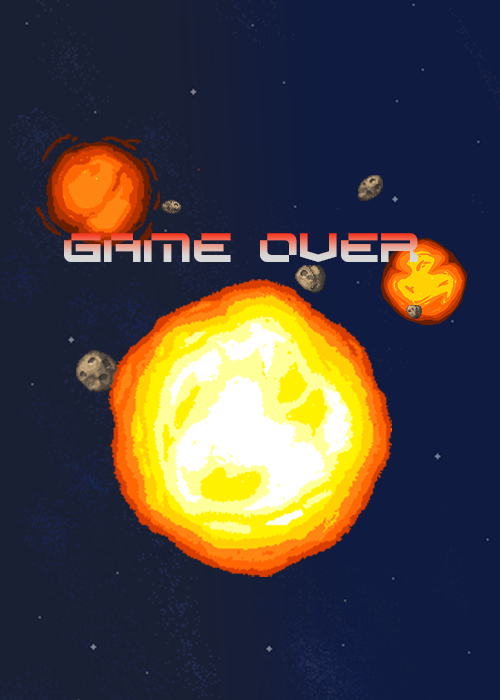
<style>
.page{position:relative;width:500px;height:700px;background:#101b41}
.page>*{position:absolute;margin:0}
.t1{font:40px "SPACERACER"}
</style>
<div class="page">
<p class="t1" style="left:64px;top:233px;width:354px;height:29px">GAME OVER</p>
</div>
